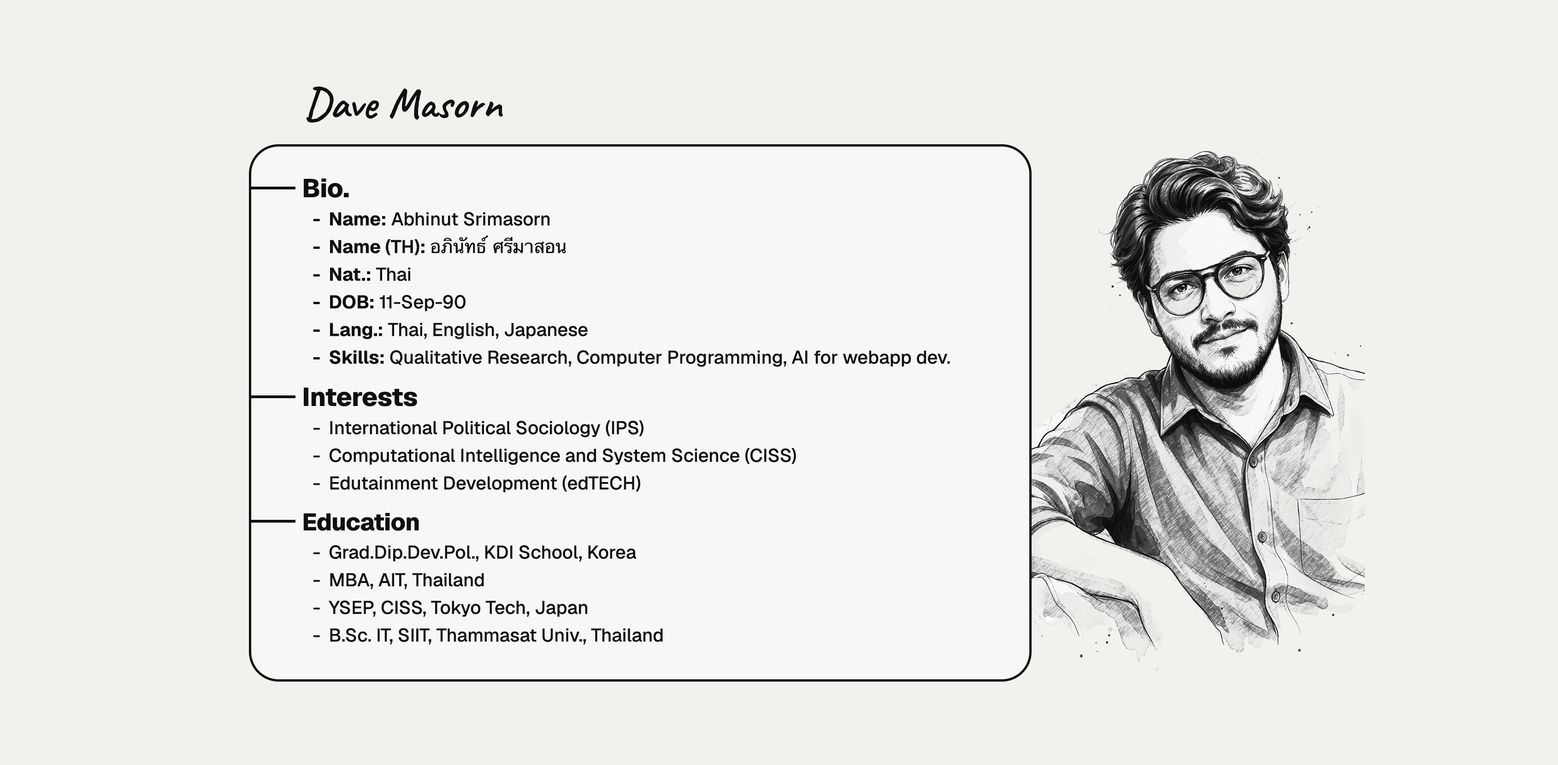
<style>
.page{position:relative;width:1558px;height:765px;background:#f1f2ee}
.page>*{position:absolute;margin:0}
.t1{font:44.3px "Caveat-SemiBold";letter-spacing:-0.01em;color:#101010}
.t2{font:25.8px "Geist-ExtraBold";letter-spacing:-0.01em;color:#101010}
.t3{font:18.4px/27.7px "Geist-Medium";color:#101010}
.t4{font:18.4px/27.7px "Geist-Bold";color:#101010}
.t5{font:18.4px/27.7px "Geist-SemiBold";color:#101010}
.t6{font:18.4px/27.7px "Thonburi";color:#101010}
.t7{font:24px "Geist-ExtraBold";letter-spacing:-0.01em;color:#101010}
</style>
<div class="page">
<p class="t1" style="left:307px;top:86px;width:196px;height:37px">Dave Masorn</p>
<p class="t2" style="left:304px;top:178px;width:45px;height:20px">Bio.</p>
<p class="t3" style="left:313px;top:212px;width:637px;height:155px"><span class="t4">Name:</span> Abhinut Srimasorn<br><span class="t4">Name </span><span class="t5">(TH)</span><span class="t4">: </span><span class="t6">อภินัทธ์ ศรีมาสอน<br></span><span class="t4">Nat.:</span> Thai<br><span class="t4">DOB:</span> 11-Sep-90<br><span class="t4">Lang.:</span> Thai, English, Japanese<br><span class="t4">Skills:</span> Qualitative Research, Computer Programming, AI for webapp dev.</p>
<p class="t2" style="left:304px;top:388px;width:113px;height:19px">Interests</p>
<p class="t3" style="left:313px;top:420px;width:483px;height:73px">International Political Sociology (IPS)<br>Computational Intelligence and System Science (CISS)<br>Edutainment Development (edTECH)</p>
<p class="t7" style="left:303px;top:513px;width:116px;height:18px">Education</p>
<p class="t3" style="left:313px;top:545px;width:350px;height:100px">Grad.Dip.Dev.Pol., KDI School, Korea<br>MBA, AIT, Thailand<br>YSEP, CISS, Tokyo Tech, Japan<br>B.Sc. IT, SIIT, Thammasat Univ., Thailand</p>
</div>
